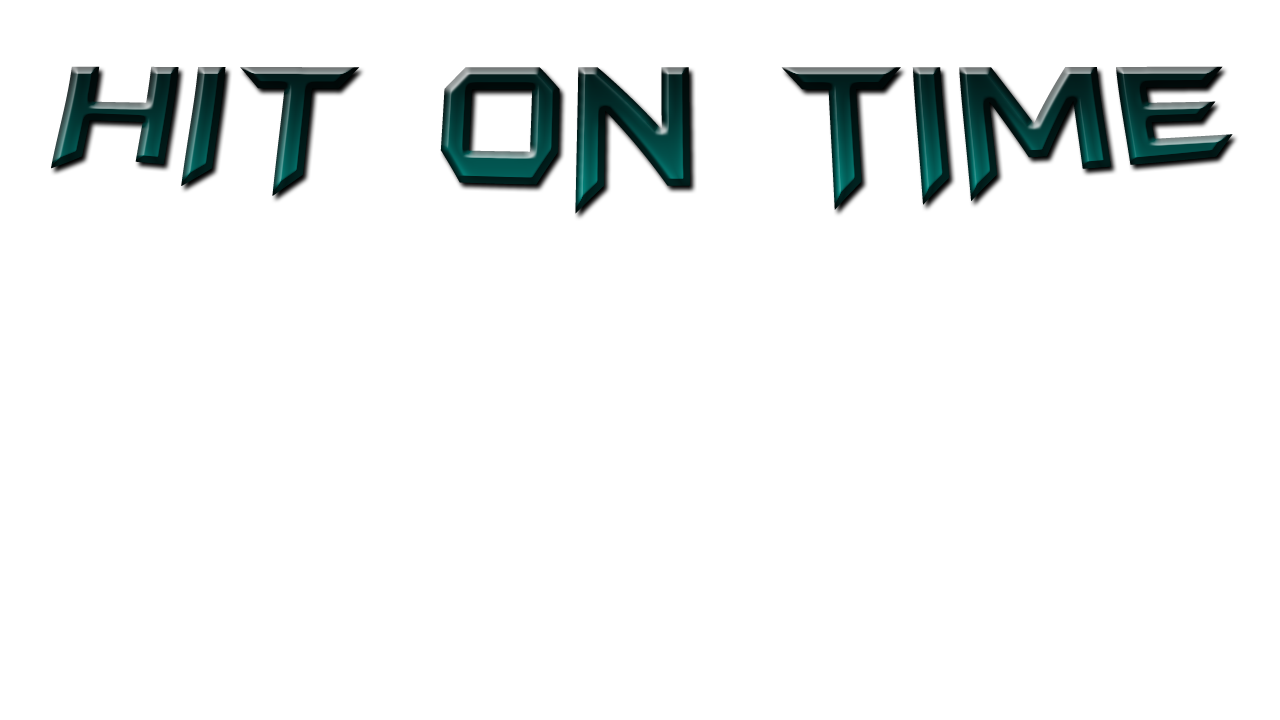
<style>
.page{position:relative;width:1280px;height:720px;background:#ffffff}
.page>*{position:absolute;margin:0}
.t1{font:150px "BatmanForeverAlternate";text-transform:uppercase}
</style>
<div class="page">
<p class="t1" style="left:51px;top:66px;width:1182px;height:148px">HIT ON TIME</p>
</div>
